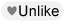
<style>
.page{position:relative;width:65px;height:22px;background:#f2f2f2}
.page>*{position:absolute;margin:0}
.t1{font:14.6px "ArialMT";letter-spacing:0.01em;color:#000000}
</style>
<div class="page">
<p class="t1" style="left:19px;top:5px;width:40px;height:12px">Unlike</p>
</div>
